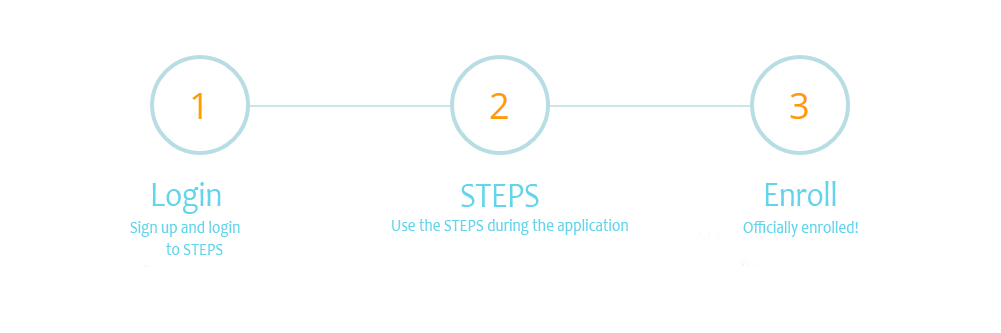
<style>
.page{position:relative;width:1001px;height:333px;background:#ffffff}
.page>*{position:absolute;margin:0}
.t1{font:36px "Candara";color:#63d5ea;scale:0.85 1}
.t2{font:18px "Candara";color:#63d5ea;scale:0.85 1}
</style>
<div class="page">
<p class="t1" style="left:152px;top:182px;width:69px;height:32px">Login</p>
<p class="t1" style="left:461px;top:184px;width:78px;height:23px">STEPS</p>
<p class="t1" style="left:765px;top:181px;width:71px;height:25px">Enroll</p>
<p class="t2" style="left:130px;top:221px;width:110px;height:34px">Sign up and login<br>  to STEPS</p>
<p class="t2" style="left:392px;top:219px;width:236px;height:16px">Use the STEPS during the application</p>
<p class="t2" style="left:743px;top:221px;width:115px;height:16px">Officially enrolled!</p>
</div>
